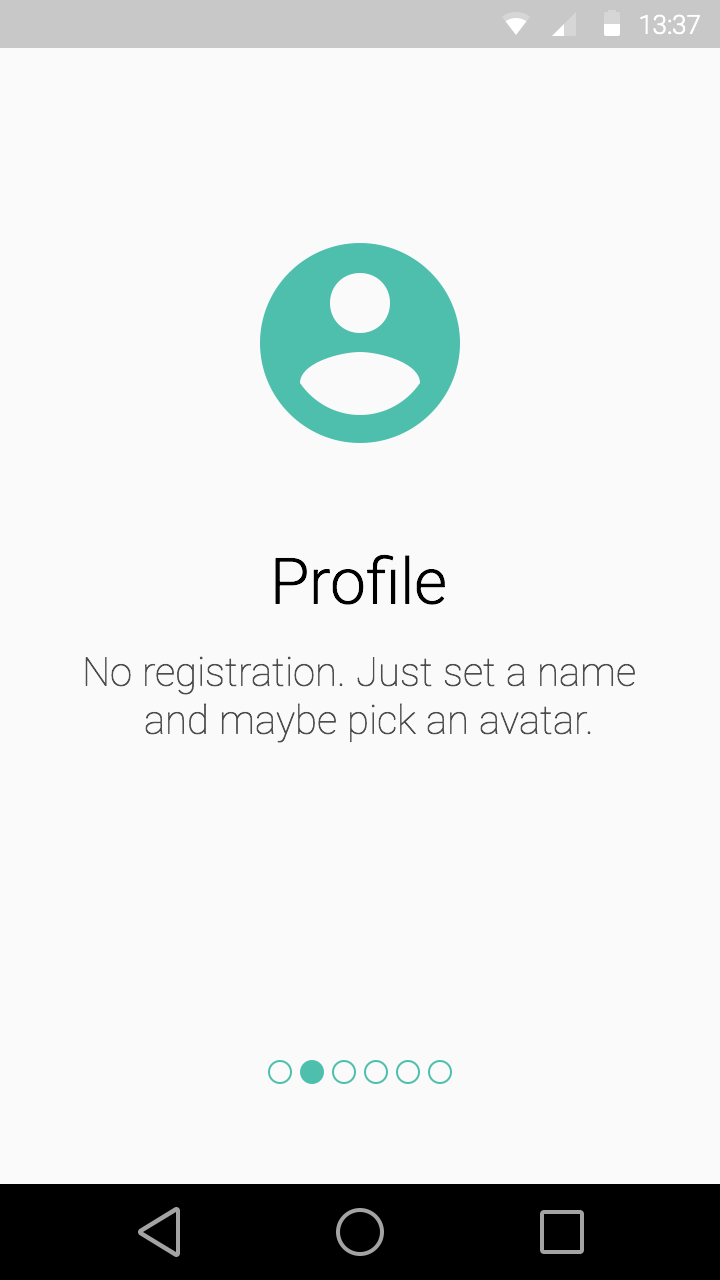
<style>
.page{position:relative;width:720px;height:1280px;background:#fafafa}
.page>*{position:absolute;margin:0}
.t1{font:26.1px "Roboto-Light";color:#ffffff}
.t2{font:64px "Roboto-Light";color:#000000}
.t3{font:40px/48px "Roboto-Thin";color:#4d4d4d}
</style>
<div class="page">
<p class="t1" style="left:640px;top:14px;width:60px;height:21px">13:37</p>
<p class="t2" style="left:275px;top:554px;width:170px;height:51px">Profile</p>
<p class="t3" style="left:85px;top:656px;width:550px;height:87px;text-align:center">No registration. Just set a name  <br>and maybe pick an avatar.</p>
</div>
